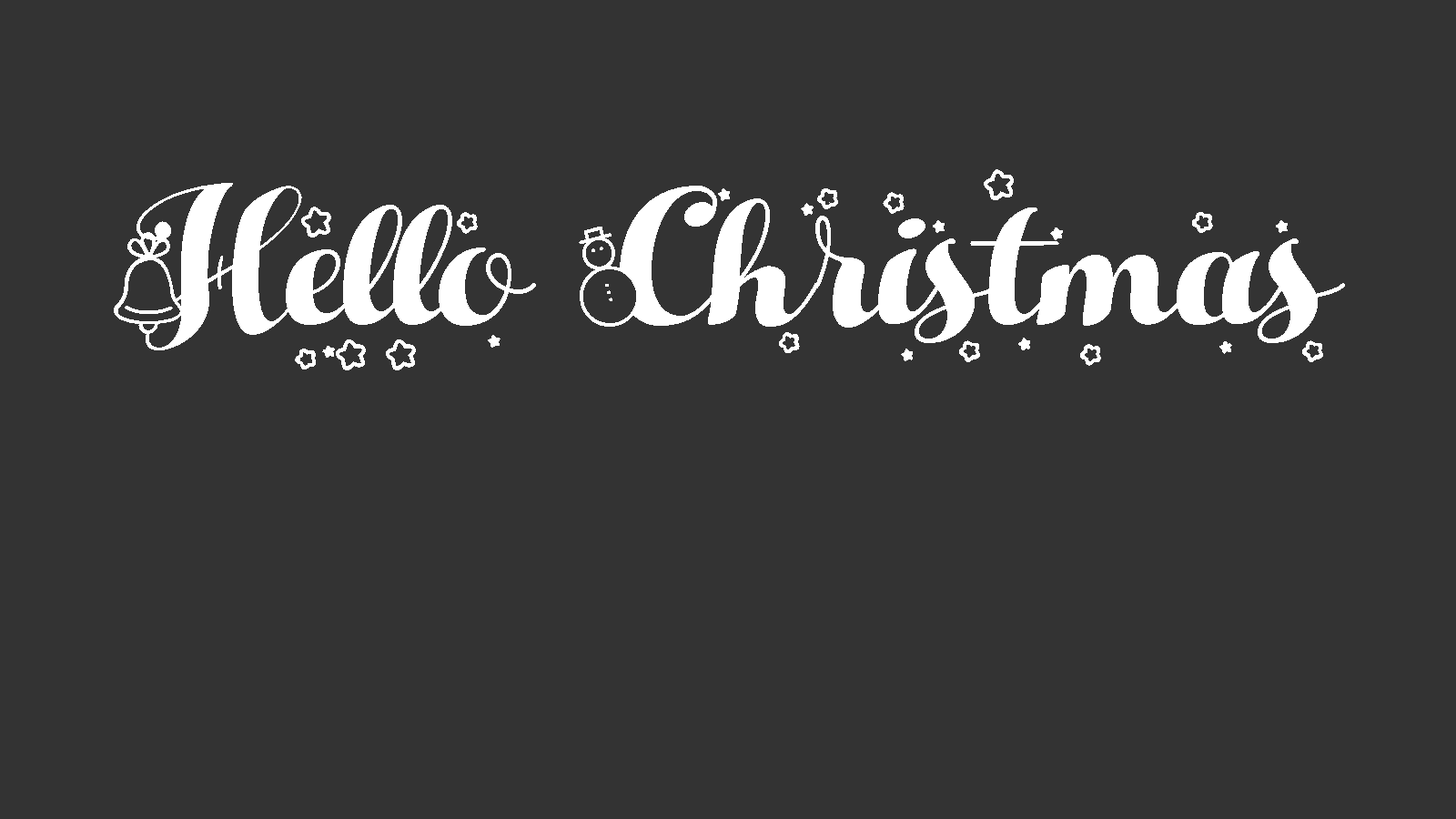
<style>
.page{position:relative;width:1456px;height:819px;background:#333333}
.page>*{position:absolute;margin:0}
.t1{font:197.1px "HelloChristmas";color:#ffffff}
</style>
<div class="page">
<p class="t1" style="left:114px;top:169px;width:1231px;height:201px">HELLO CHRISTMAS</p>
</div>
